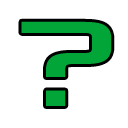
<style>
.page{position:relative;width:128px;height:128px;background:#ffffff}
.page>*{position:absolute;margin:0}
.t1{font:128px "Xolonium";color:#02a638}
</style>
<div class="page">
<p class="t1" style="left:21px;top:21px;width:91px;height:85px">?</p>
</div>
